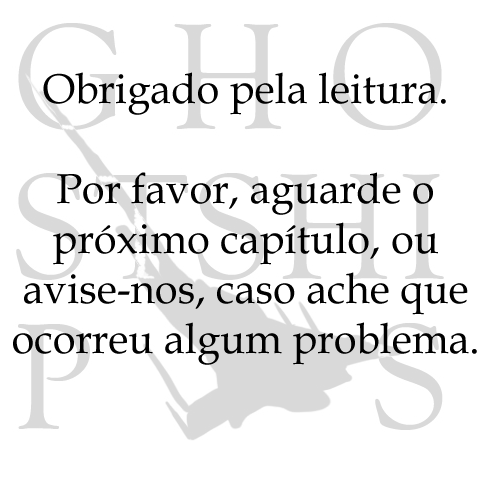
<style>
.page{position:relative;width:500px;height:500px;background:#ffffff}
.page>*{position:absolute;margin:0}
.t1{font:41.7px "BookAntiqua";color:#000000}
</style>
<div class="page">
<p class="t1" style="left:13px;top:72px;width:464px;height:293px;text-align:center">Obrigado pela leitura. <br><br>Por favor, aguarde o <br>próximo capítulo, ou  avise-nos, caso ache que <br>ocorreu algum problema.</p>
</div>
